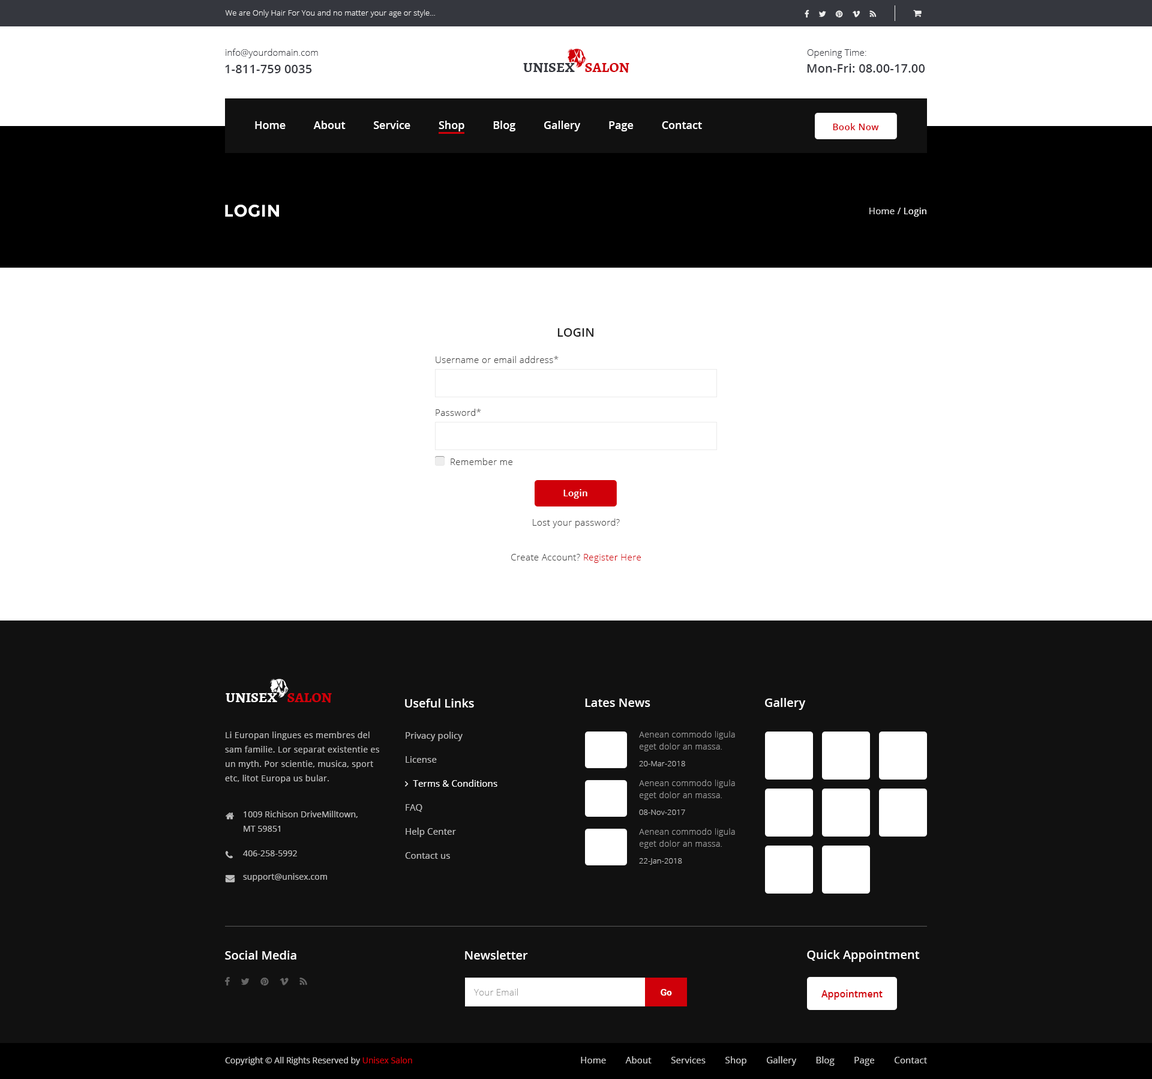
<style>
.page{position:relative;width:1152px;height:1079px;background:#ffffff}
.page>*{position:absolute;margin:0}
.t1{font:7.8px "OpenSans-Light";letter-spacing:0.01em;color:#efefef}
.t2{font:9px "OpenSans-Light";letter-spacing:0.01em;color:#35373e}
.t3{font:12px "OpenSans-Semibold";letter-spacing:0.01em;color:#35373e}
.t4{font:14.4px "Alegreya-Bold";color:#35373e;text-transform:uppercase}
.t5{font:14.4px "Alegreya-Bold";color:#d00009;text-transform:uppercase}
.t6{font:10.8px "OpenSans-Semibold";color:#ffffff}
.t7{font:9px "OpenSans-Semibold";letter-spacing:0.03em;color:#d00009}
.t8{font:16.8px "Montserrat-Bold";letter-spacing:0.02em;color:#ffffff;text-transform:uppercase}
.t9{font:9px "OpenSans";letter-spacing:0.02em;color:#dddddd}
.t10{font:9px "OpenSans";letter-spacing:0.02em;color:#ffffff}
.t11{font:12px "OpenSans-Semibold";color:#222222}
.t12{font:9px "OpenSans-Light";letter-spacing:0.03em;color:#444444}
.t13{font:9px "OpenSans-Semibold";letter-spacing:0.03em;color:#fffefe}
.t14{font:9px "OpenSans-Light";letter-spacing:0.03em;color:#d00009}
.t15{font:14.4px "Alegreya-Bold";color:#ffffff;text-transform:uppercase}
.t16{font:12px "OpenSans-Semibold";color:#ffffff}
.t17{font:8.4px/14.4px "OpenSans";letter-spacing:0.03em;color:#bbbbbb}
.t18{font:8.4px/12px "OpenSans-Light";letter-spacing:0.03em;color:#999999}
.t19{font:7.8px "OpenSans-Light";letter-spacing:0.01em;color:#bbbbbb}
.t20{font:8.4px/14.4px "OpenSans";letter-spacing:0.01em;color:#bbbbbb}
.t21{font:8.4px "OpenSans";letter-spacing:0.01em;color:#bbbbbb}
.t22{font:9px "OpenSans-Light";letter-spacing:0.02em;color:#999999}
.t23{font:9px "RobotoSlab-Bold";letter-spacing:0.02em;color:#ffffff}
.t24{font:9.6px "OpenSans-Semibold";color:#d00009}
.t25{font:8.4px "OpenSans";color:#cccccc}
.t26{font:8.4px "OpenSans";color:#d00009}
.t27{font:9px "OpenSans";letter-spacing:0.01em;color:#cccccc}
</style>
<div class="page">
<p class="t1" style="left:225px;top:10px;width:210px;height:7px">We are Only Hair For You and no matter your age or style...</p>
<p class="t2" style="left:226px;top:49px;width:92px;height:9px">info@yourdomain.com</p>
<p class="t2" style="left:807px;top:49px;width:59px;height:9px">Opening Time:</p>
<p class="t3" style="left:225px;top:65px;width:87px;height:8px">1-811-759 0035</p>
<p class="t4" style="left:523px;top:62px;width:106px;height:11px">Unisex    <span class="t5">Salon</span></p>
<p class="t3" style="left:807px;top:64px;width:118px;height:9px">Mon-Fri: 08.00-17.00</p>
<p class="t6" style="left:255px;top:121px;width:447px;height:10px">Home          About          Service          Shop          Blog          Gallery          Page          Contact</p>
<p class="t7" style="left:833px;top:123px;width:46px;height:7px">Book Now</p>
<p class="t8" style="left:225px;top:205px;width:54px;height:12px">Login</p>
<p class="t9" style="left:869px;top:208px;width:57px;height:9px">Home / <span class="t10">Login</span></p>
<p class="t11" style="left:557px;top:328px;width:36px;height:9px">LOGIN</p>
<p class="t12" style="left:436px;top:356px;width:123px;height:7px">Username or email address*</p>
<p class="t12" style="left:436px;top:409px;width:45px;height:7px">Password*</p>
<p class="t12" style="left:451px;top:458px;width:61px;height:7px">Remember me</p>
<p class="t13" style="left:563px;top:489px;width:24px;height:10px">Login</p>
<p class="t12" style="left:533px;top:518px;width:87px;height:10px">Lost your password?</p>
<p class="t12" style="left:511px;top:554px;width:130px;height:9px">Create Account? <span class="t14">Register Here</span></p>
<p class="t15" style="left:226px;top:692px;width:106px;height:11px">Unisex    <span class="t5">Salon</span></p>
<p class="t16" style="left:405px;top:698px;width:69px;height:9px">Useful Links</p>
<p class="t16" style="left:585px;top:698px;width:65px;height:9px">Lates News</p>
<p class="t16" style="left:765px;top:698px;width:41px;height:12px">Gallery</p>
<p class="t17" style="left:225px;top:731px;width:154px;height:52px">Li Europan lingues es membres del sam familie. Lor separat existentie es un myth. Por scientie, musica, sport etc, litot Europa us bular.</p>
<p class="t18" style="left:639px;top:731px;width:96px;height:20px">Aenean commodo ligula eget dolor an massa.</p>
<p class="t19" style="left:639px;top:761px;width:46px;height:5px">20-Mar-2018</p>
<p class="t18" style="left:639px;top:779px;width:96px;height:21px">Aenean commodo ligula eget dolor an massa.</p>
<p class="t19" style="left:639px;top:809px;width:46px;height:6px">08-Nov-2017</p>
<p class="t20" style="left:244px;top:811px;width:114px;height:21px">1009 Richison DriveMilltown, <br>MT 59851</p>
<p class="t18" style="left:639px;top:828px;width:96px;height:20px">Aenean commodo ligula eget dolor an massa.</p>
<p class="t21" style="left:243px;top:850px;width:54px;height:6px">406-258-5992</p>
<p class="t19" style="left:639px;top:858px;width:43px;height:7px">22-Jan-2018</p>
<p class="t21" style="left:243px;top:873px;width:84px;height:8px">support@unisex.com</p>
<p class="t16" style="left:225px;top:950px;width:71px;height:9px">Social Media</p>
<p class="t16" style="left:465px;top:950px;width:63px;height:9px">Newsletter</p>
<p class="t16" style="left:807px;top:950px;width:113px;height:12px">Quick Appointment</p>
<p class="t22" style="left:474px;top:988px;width:44px;height:7px">Your Email</p>
<p class="t23" style="left:661px;top:989px;width:11px;height:6px">Go</p>
<p class="t24" style="left:821px;top:989px;width:62px;height:11px">Appointment</p>
<p class="t25" style="left:225px;top:1057px;width:187px;height:8px">Copyright © All Rights Reserved by <span class="t26">Unisex Salon</span></p>
<p class="t27" style="left:581px;top:1056px;width:346px;height:10px">Home        About        Services        Shop        Gallery        Blog        Page        Contact</p>
</div>
